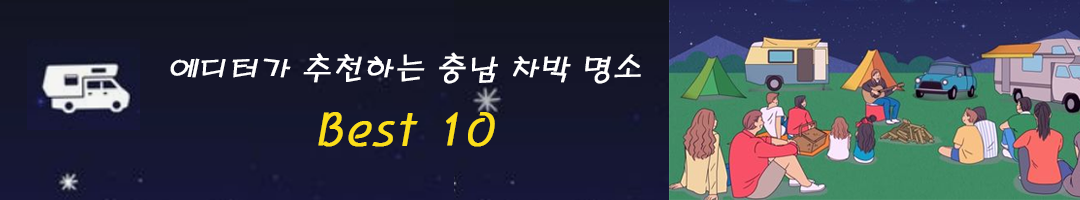
<style>
.page{position:relative;width:1080px;height:200px}
.page>*{position:absolute;margin:0}
.t1{font:30px "H2porL";color:#ffffff;font-weight:bold;font-style:italic}
.t2{font:45px "H2porL";color:#fbde19;font-weight:bold;font-style:italic}
</style>
<div class="page">
<p class="t1" style="left:170px;top:52px;width:471px;height:95px;text-align:center">에디터가 추천하는 충남 차박 명소<br><span class="t2">Best 10</span></p>
</div>
